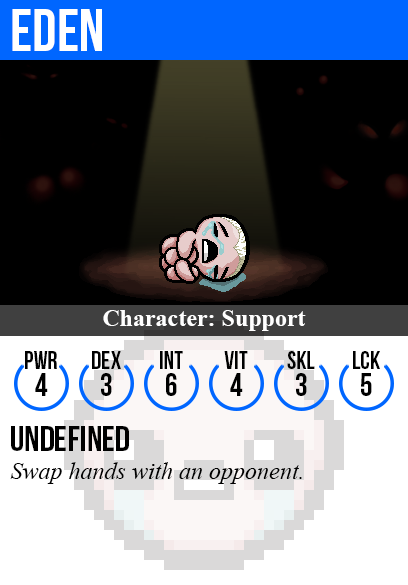
<style>
.page{position:relative;width:408px;height:585px;background:#000000}
.page>*{position:absolute;margin:0}
.t1{font:60px "BebasNeue";color:#ffffff}
.t2{font:24px "TimesNewRomanPS-BoldMT";color:#ffffff}
.t3{font:25px "BebasNeue";color:#000000}
.t4{font:32px "BebasNeue";color:#000000}
.t5{font:36px "BebasNeue";color:#000000}
.t6{font:24px "TimesNewRomanPS-ItalicMT";color:#000000}
</style>
<div class="page">
<p class="t1" style="left:12px;top:9px;width:90px;height:42px">eden</p>
<p class="t2" style="left:103px;top:310px;width:203px;height:21px">Character: Support</p>
<p class="t3" style="left:25px;top:351px;width:32px;height:18px">PWR</p>
<p class="t3" style="left:92px;top:351px;width:29px;height:18px">dex</p>
<p class="t3" style="left:160px;top:351px;width:23px;height:18px">int</p>
<p class="t3" style="left:224px;top:351px;width:24px;height:18px">vit</p>
<p class="t3" style="left:287px;top:351px;width:28px;height:18px">skl</p>
<p class="t3" style="left:353px;top:351px;width:27px;height:18px">lck</p>
<p class="t4" style="left:35px;top:373px;width:13px;height:23px">4</p>
<p class="t4" style="left:101px;top:373px;width:11px;height:23px">3</p>
<p class="t4" style="left:166px;top:373px;width:11px;height:23px">6</p>
<p class="t4" style="left:230px;top:373px;width:13px;height:23px">4</p>
<p class="t4" style="left:296px;top:373px;width:11px;height:23px">3</p>
<p class="t4" style="left:361px;top:373px;width:11px;height:23px">5</p>
<p class="t5" style="left:11px;top:426px;width:118px;height:25px">undefined</p>
<p class="t6" style="left:10px;top:462px;width:292px;height:22px">Swap hands with an opponent.</p>
</div>
